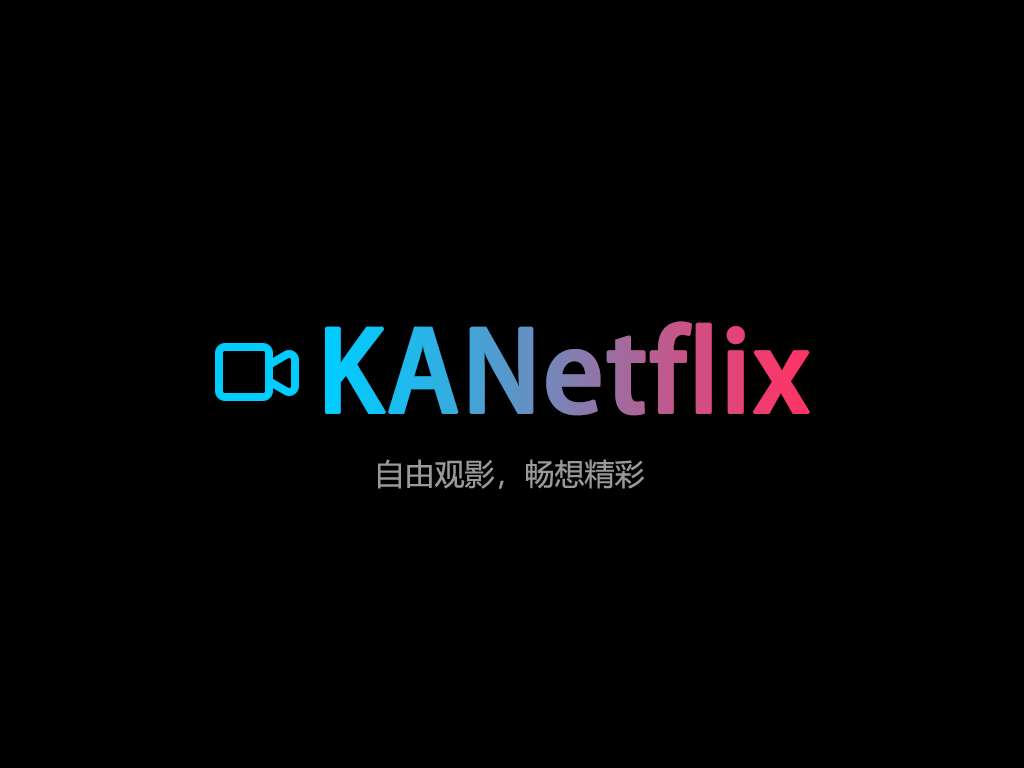
<style>
.page{position:relative;width:1024px;height:768px;background:#000000}
.page>*{position:absolute;margin:0}
.t1{font:110px "AdobeHeitiStd-Regular";font-weight:bold}
.t2{font:30px "MicrosoftYaHei";color:#999999}
</style>
<div class="page">
<p class="t1" style="left:325px;top:321px;width:485px;height:95px">KANetflix</p>
<p class="t2" style="left:378px;top:459px;width:266px;height:30px">自由观影，畅想精彩</p>
</div>
